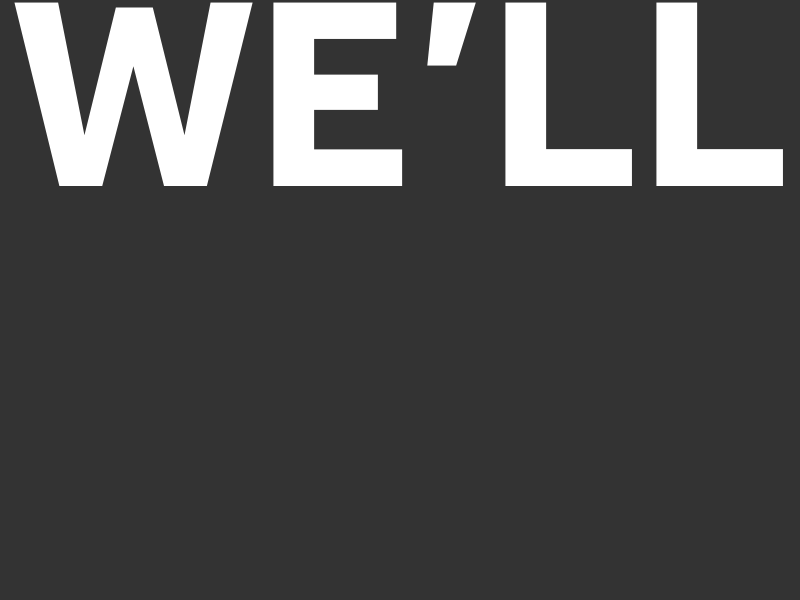
<style>
.page{position:relative;width:800px;height:600px;background:#333333}
.page>*{position:absolute;margin:0}
.t1{font:275.1px "Effra-Bold";color:#ffffff}
</style>
<div class="page">
<p class="t1" style="left:14px;top:2px;width:769px;height:184px">WE’LL</p>
</div>
